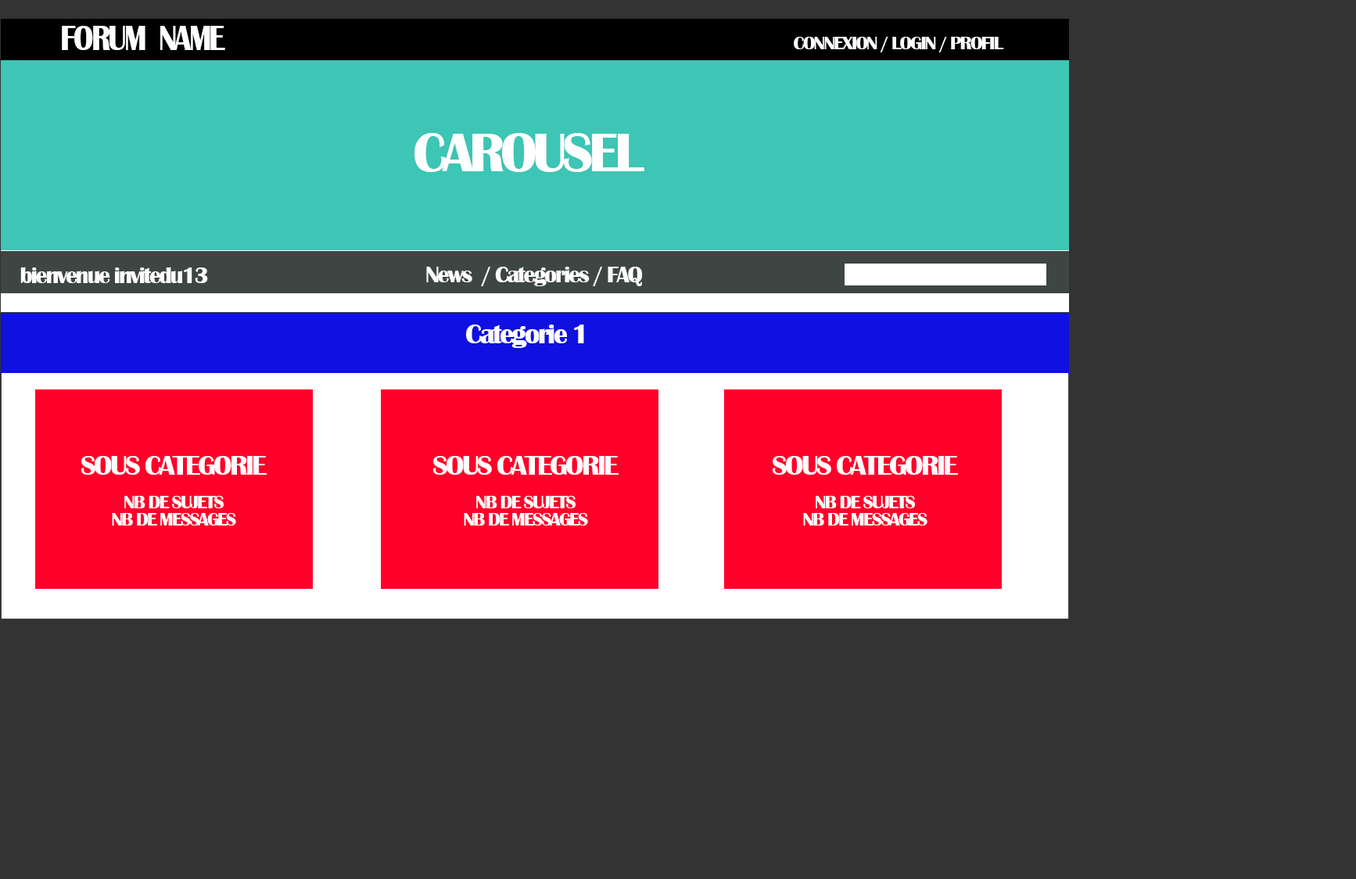
<style>
.page{position:relative;width:1356px;height:879px;background:#333333}
.page>*{position:absolute;margin:0}
.t1{font:37.1px "BritannicBold";letter-spacing:-0.075em;color:#fefefe;scale:0.83 1}
.t2{font:18.8px "BritannicBold";letter-spacing:-0.075em;color:#fefefe}
.t3{font:56.3px "BritannicBold";letter-spacing:-0.075em;color:#fefefe}
.t4{font:23.5px "BritannicBold";letter-spacing:-0.075em;color:#fefefe}
.t5{font:28.2px "BritannicBold";letter-spacing:-0.075em;color:#fefefe}
.t6{font:18.8px/15.6px "BritannicBold";letter-spacing:-0.075em;color:#fefefe}
.t7{font:28.2px/15.6px "BritannicBold";letter-spacing:-0.075em;color:#fefefe}
</style>
<div class="page">
<p class="t1" style="left:62px;top:26px;width:163px;height:24px">FORUM  NAME</p>
<p class="t2" style="left:794px;top:37px;width:210px;height:15px">CONNEXION / LOGIN / PROFIL</p>
<p class="t3" style="left:415px;top:133px;width:230px;height:39px">CAROUSEL</p>
<p class="t4" style="left:20px;top:267px;width:188px;height:16px">bienvenue invitedu13</p>
<p class="t4" style="left:426px;top:267px;width:217px;height:19px">News  / Categories / FAQ</p>
<p class="t5" style="left:466px;top:325px;width:118px;height:23px">Categorie 1</p>
<p class="t6" style="left:81px;top:456px;width:186px;height:70px;text-align:center"><span class="t7">SOUS CATEGORIE<br><br></span>NB DE SUJETS<br>NB DE MESSAGES</p>
<p class="t6" style="left:433px;top:456px;width:186px;height:70px;text-align:center"><span class="t7">SOUS CATEGORIE<br><br></span>NB DE SUJETS<br>NB DE MESSAGES</p>
<p class="t6" style="left:773px;top:456px;width:185px;height:70px;text-align:center"><span class="t7">SOUS CATEGORIE<br><br></span>NB DE SUJETS<br>NB DE MESSAGES</p>
</div>
